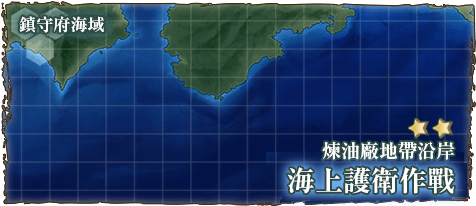
<style>
.page{position:relative;width:476px;height:206px}
.page>*{position:absolute;margin:0}
.t1{font:17px "RyuminPr6N-ExBold";color:#ffffff}
.t2{font:19px "RyuminPr6N-ExBold";color:#ffffff}
.t3{font:28px "RyuminPr6N-ExBold";color:#ffffff}
</style>
<div class="page">
<p class="t1" style="left:19px;top:16px;width:85px;height:17px">鎮守府海域</p>
<p class="t2" style="left:322px;top:141px;width:133px;height:19px">煉油廠地帶沿岸</p>
<p class="t3" style="left:287px;top:167px;width:168px;height:27px">海上護衛作戰</p>
</div>
